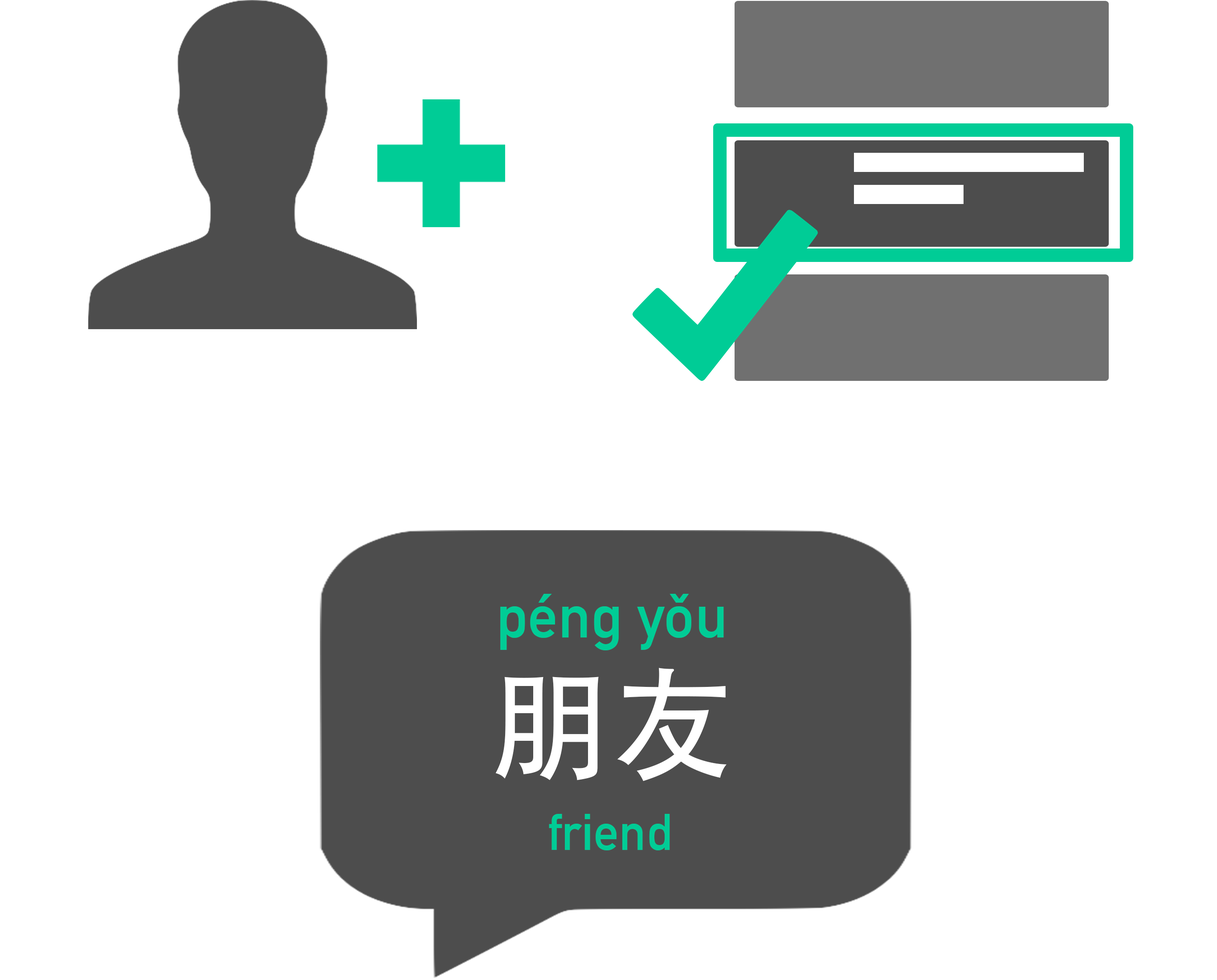
<style>
.page{position:relative;width:1217px;height:980px;background:#ffffff}
.page>*{position:absolute;margin:0}
.t1{font:61px "DINAlternate-Bold";color:#00cc96}
.t2{font:121.9px "AdobeHeitiStd-Regular";color:#ffffff}
.t3{font:50.8px "DINAlternate-Bold";color:#00cc96}
</style>
<div class="page">
<p class="t1" style="left:500px;top:594px;width:224px;height:56px">péng yǒu</p>
<p class="t2" style="left:495px;top:668px;width:231px;height:113px">朋友</p>
<p class="t3" style="left:549px;top:814px;width:121px;height:36px">friend</p>
</div>
